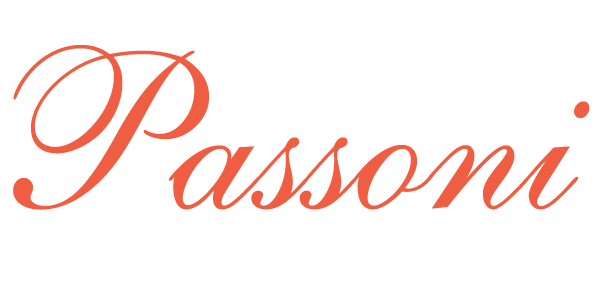
<style>
.page{position:relative;width:600px;height:300px;background:#ffffff}
.page>*{position:absolute;margin:0}
.t1{font:222.2px "English111VivaceBT-Regular";color:#ef5e43}
</style>
<div class="page">
<p class="t1" style="left:13px;top:45px;width:577px;height:165px">Passoni</p>
</div>
